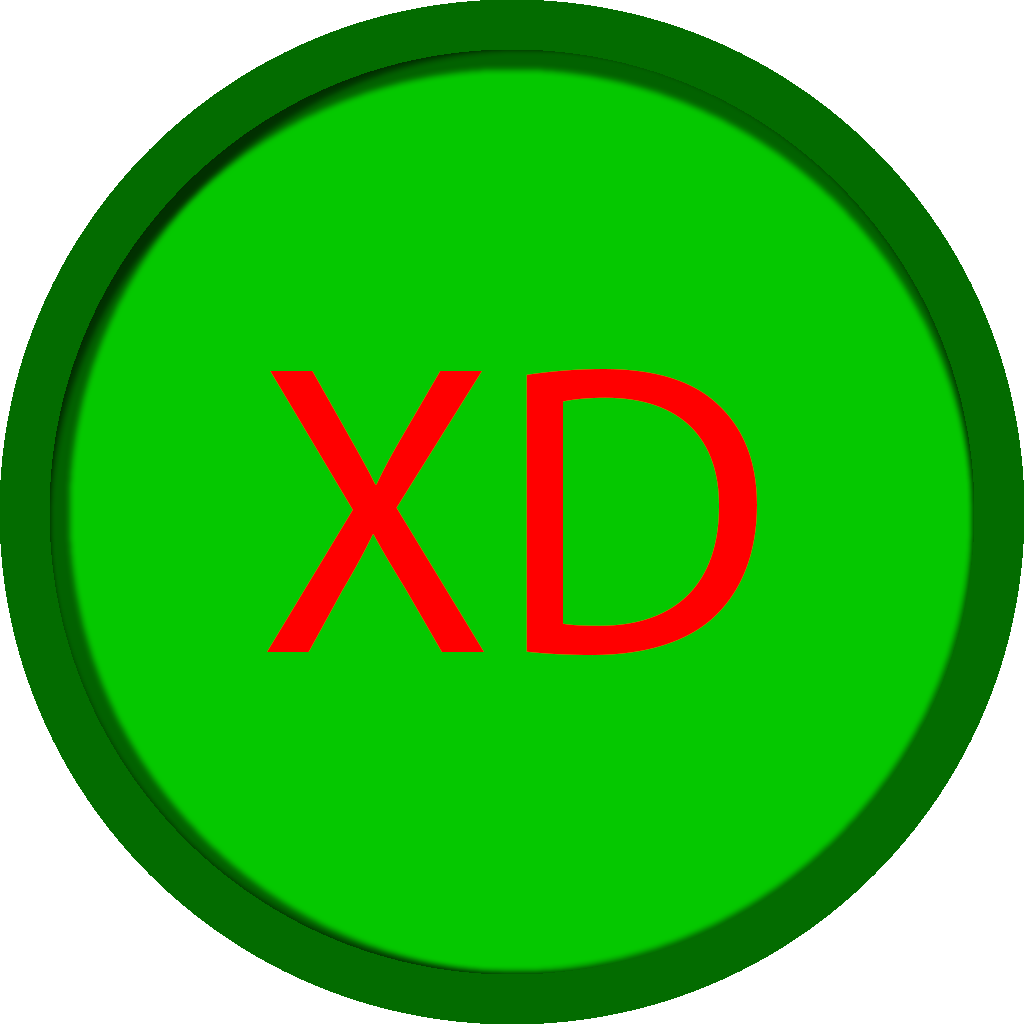
<style>
.page{position:relative;width:1024px;height:1024px;background:#05c800}
.page>*{position:absolute;margin:0}
.t1{font:416.7px "MyriadPro-Regular";color:#ff0000}
</style>
<div class="page">
<p class="t1" style="left:267px;top:369px;width:490px;height:287px">XD</p>
</div>
